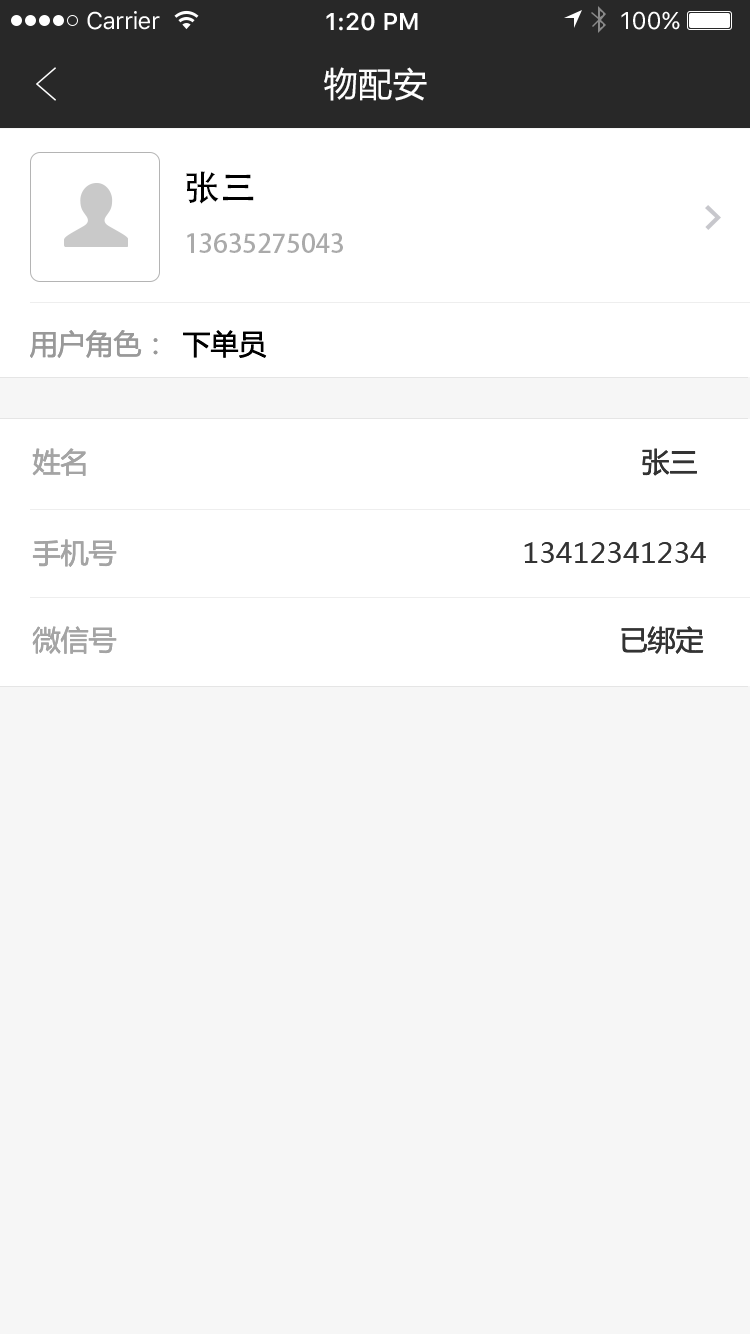
<style>
.page{position:relative;width:750px;height:1334px;background:#f6f6f6}
.page>*{position:absolute;margin:0}
.t1{font:24px "SFUIText-Regular";letter-spacing:-0.025em;color:#ffffff}
.t2{font:24px "SFUIText-Semibold";color:#ffffff}
.t3{font:24px "SFUIText-Regular";color:#ffffff}
.t4{font:34px "MicrosoftYaHei";letter-spacing:0.02em;color:#ffffff}
.t5{font:36px "AdobeHeitiStd-Regular";color:#000000}
.t6{font:26px "AdobeHeitiStd-Regular";color:#aaaaaa}
.t7{font:28px "MicrosoftYaHei";color:#999999}
.t8{font:28px "MicrosoftYaHei";color:#000000}
.t9{font:28px "MicrosoftYaHei";color:#a4a4a4}
.t10{font:28px "MicrosoftYaHei";color:#333333}
</style>
<div class="page">
<p class="t1" style="left:87px;top:11px;width:73px;height:19px">Carrier</p>
<p class="t2" style="left:326px;top:12px;width:92px;height:19px">1:20 PM</p>
<p class="t3" style="left:621px;top:11px;width:59px;height:19px">100%</p>
<p class="t4" style="left:324px;top:67px;width:103px;height:34px">物配安</p>
<p class="t5" style="left:186px;top:171px;width:68px;height:33px">张三</p>
<p class="t6" style="left:187px;top:233px;width:156px;height:20px">13635275043</p>
<p class="t7" style="left:30px;top:330px;width:128px;height:28px">用户角色：</p>
<p class="t8" style="left:183px;top:330px;width:84px;height:28px">下单员</p>
<p class="t9" style="left:32px;top:448px;width:54px;height:28px">姓名</p>
<p class="t10" style="left:642px;top:448px;width:55px;height:28px">张三</p>
<p class="t9" style="left:32px;top:539px;width:85px;height:28px">手机号</p>
<p class="t10" style="left:524px;top:542px;width:182px;height:21px">13412341234</p>
<p class="t9" style="left:32px;top:626px;width:85px;height:28px">微信号</p>
<p class="t10" style="left:621px;top:626px;width:83px;height:28px">已绑定</p>
</div>
